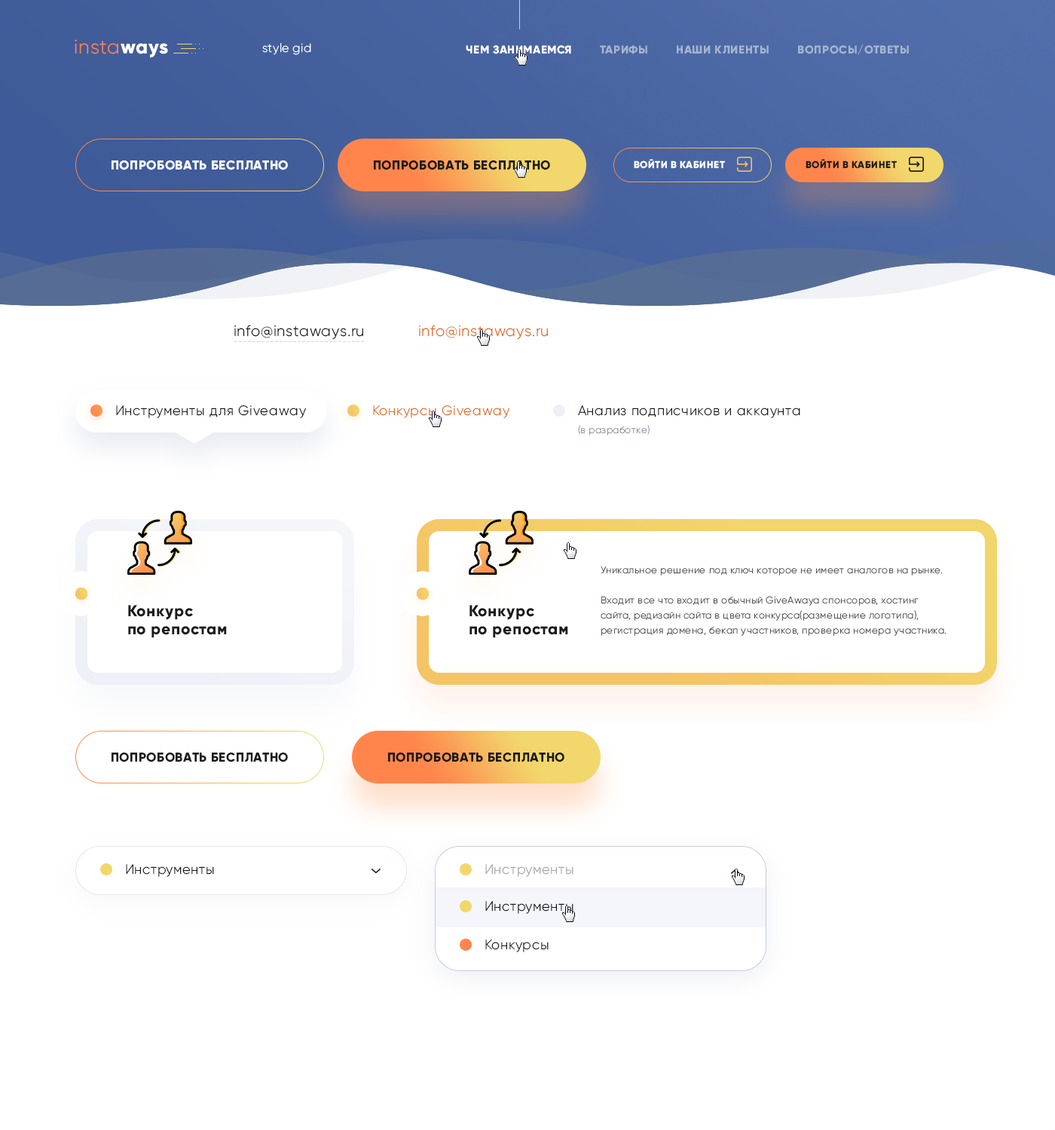
<style>
.page{position:relative;width:1055px;height:1130px;background:#ffffff}
.page>*{position:absolute;margin:0}
.t1{font:19.6px "Gilroy-Light";letter-spacing:0.04em;color:#ff854c}
.t2{font:19.6px "Gilroy-ExtraBold";letter-spacing:0.04em;color:#ffffff}
.t3{font:12.1px "Gilroy-Light";letter-spacing:0.04em;color:#ffffff}
.t4{font:11.3px "Gilroy-ExtraBold";letter-spacing:0.04em;color:#a6b5d0;text-transform:uppercase}
.t5{font:11.3px "Gilroy-ExtraBold";letter-spacing:0.04em;color:#ffffff;text-transform:uppercase}
.t6{font:12.8px "Gilroy-ExtraBold";letter-spacing:0.04em;color:#ffffff;text-transform:uppercase}
.t7{font:12.8px "Gilroy-ExtraBold";letter-spacing:0.04em;color:#191a1a;text-transform:uppercase}
.t8{font:9.8px "Gilroy-ExtraBold";letter-spacing:0.04em;color:#ffffff;text-transform:uppercase}
.t9{font:9.8px "Gilroy-ExtraBold";letter-spacing:0.04em;color:#191a1a;text-transform:uppercase}
.t10{font:15.1px "Gilroy-Light";letter-spacing:0.04em;color:#191a1a}
.t11{font:15.1px "Gilroy-Light";letter-spacing:0.04em;color:#e26b24}
.t12{font:13.6px "Gilroy-Light";letter-spacing:0.04em;color:#191a1a}
.t13{font:13.6px "Gilroy-Light";letter-spacing:0.04em;color:#e26b24}
.t14{font:9.8px/18.1px "Gilroy-Light";letter-spacing:0.04em;color:#9499a3}
.t15{font:9.8px/15.1px "Gilroy-Light";letter-spacing:0.04em;color:#57595c}
.t16{font:15.8px/18.1px "Gilroy-ExtraBold";letter-spacing:0.04em;color:#191a1a}
.t17{font:13.6px "Gilroy-Light";letter-spacing:0.04em;color:#a7a7a7}
</style>
<div class="page">
<p class="t1" style="left:75px;top:39px;width:93px;height:19px">insta<span class="t2">ways</span></p>
<p class="t3" style="left:262px;top:43px;width:49px;height:12px">style gid</p>
<p class="t4" style="left:466px;top:44px;width:443px;height:11px"><span class="t5">Чем занимаемся</span>        Тарифы        Наши клиенты        Вопросы/Ответы</p>
<p class="t6" style="left:112px;top:160px;width:176px;height:10px">Попробовать бесплатно</p>
<p class="t7" style="left:374px;top:160px;width:176px;height:10px">Попробовать бесплатно</p>
<p class="t8" style="left:634px;top:159px;width:91px;height:10px">Войти в кабинет</p>
<p class="t9" style="left:806px;top:159px;width:91px;height:10px">Войти в кабинет</p>
<p class="t10" style="left:234px;top:325px;width:129px;height:15px">info@instaways.ru</p>
<p class="t11" style="left:419px;top:325px;width:129px;height:15px">info@instaways.ru</p>
<p class="t12" style="left:116px;top:405px;width:190px;height:13px">Инструменты для Giveaway</p>
<p class="t13" style="left:373px;top:405px;width:136px;height:13px">Конкурсы Giveaway</p>
<p class="t12" style="left:578px;top:405px;width:222px;height:31px">Анализ подписчиков и аккаунта<br><span class="t14">(в разработке)</span></p>
<p class="t15" style="left:601px;top:566px;width:345px;height:70px">Уникальное решение под ключ которое не имеет аналогов на рынке. <br><br>Входит все что входит в обычный GiveAwayа спонсоров, хостинг сайта, редизайн сайта в цвета конкурса(размещение логотипа), регистрация домена, бекап участников, проверка номера участника.</p>
<p class="t16" style="left:128px;top:605px;width:99px;height:33px">Конкурс<br>по репостам</p>
<p class="t16" style="left:469px;top:605px;width:99px;height:33px">Конкурс<br>по репостам</p>
<p class="t7" style="left:112px;top:752px;width:176px;height:11px">Попробовать бесплатно</p>
<p class="t7" style="left:388px;top:752px;width:176px;height:11px">Попробовать бесплатно</p>
<p class="t12" style="left:126px;top:864px;width:88px;height:13px">Инструменты</p>
<p class="t17" style="left:485px;top:864px;width:88px;height:13px">Инструменты</p>
<p class="t12" style="left:485px;top:901px;width:88px;height:13px">Инструменты</p>
<p class="t12" style="left:485px;top:940px;width:64px;height:12px">Конкурсы</p>
</div>
